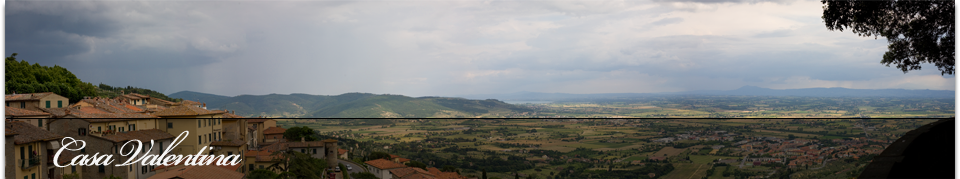
<style>
.page{position:relative;width:960px;height:179px}
.page>*{position:absolute;margin:0}
.t1{font:60px "BickhamScriptPro-Regular";letter-spacing:-0.05em;color:#f5f5f5}
</style>
<div class="page">
<p class="t1" style="left:53px;top:130px;width:189px;height:38px">Casa Valentina</p>
</div>
